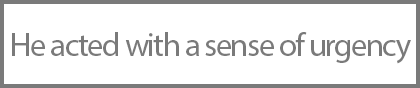
<style>
.page{position:relative;width:420px;height:88px;background:#ffffff}
.page>*{position:absolute;margin:0}
.t1{font:33px "MyriadPro-Regular";letter-spacing:-0.05em;color:#7a7a7a}
</style>
<div class="page">
<p class="t1" style="left:12px;top:32px;width:399px;height:32px">He acted with a sense of urgency</p>
</div>
